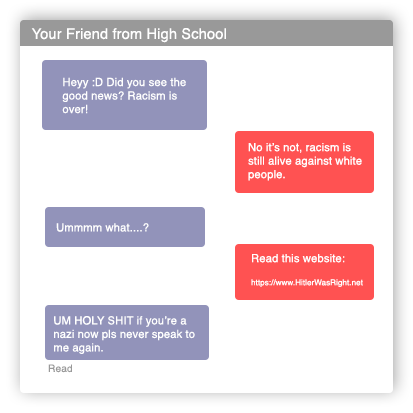
<style>
.page{position:relative;width:413px;height:413px;background:#ffffff}
.page>*{position:absolute;margin:0}
.t1{font:14.6px "Helvetica";letter-spacing:0.01em;color:#ffffff}
.t2{font:11.2px "Helvetica";letter-spacing:0.01em;color:#ffffff}
.t3{font:8px "Helvetica";letter-spacing:0.01em;color:#ffffff}
.t4{font:10.1px "Helvetica";letter-spacing:0.01em;color:#999999}
</style>
<div class="page">
<p class="t1" style="left:31px;top:28px;width:195px;height:15px">Your Friend from High School</p>
<p class="t2" style="left:62px;top:77px;width:124px;height:37px">Heyy :D Did you see the<br>good news? Racism is<br>over!</p>
<p class="t2" style="left:248px;top:143px;width:114px;height:38px">No it’s not, racism is<br>still alive against white<br>people.</p>
<p class="t2" style="left:56px;top:223px;width:93px;height:9px">Ummmm what....?</p>
<p class="t3" style="left:251px;top:254px;width:112px;height:33px"><span class="t2">Read this website:<br><br></span>https://www.HitlerWasRight.net</p>
<p class="t2" style="left:54px;top:316px;width:141px;height:38px">UM HOLY SHIT if you’re a <br>nazi now pls never speak to <br>me again.</p>
<p class="t4" style="left:48px;top:364px;width:24px;height:9px">Read</p>
</div>
